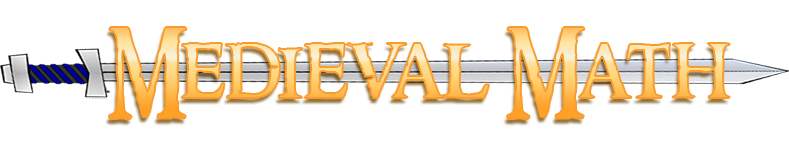
<style>
.page{position:relative;width:789px;height:158px;background:#ffffff}
.page>*{position:absolute;margin:0}
.t1{font:87.3px "RingbearerMedium"}
</style>
<div class="page">
<p class="t1" style="left:109px;top:27px;width:621px;height:92px">Medieval Math</p>
</div>
